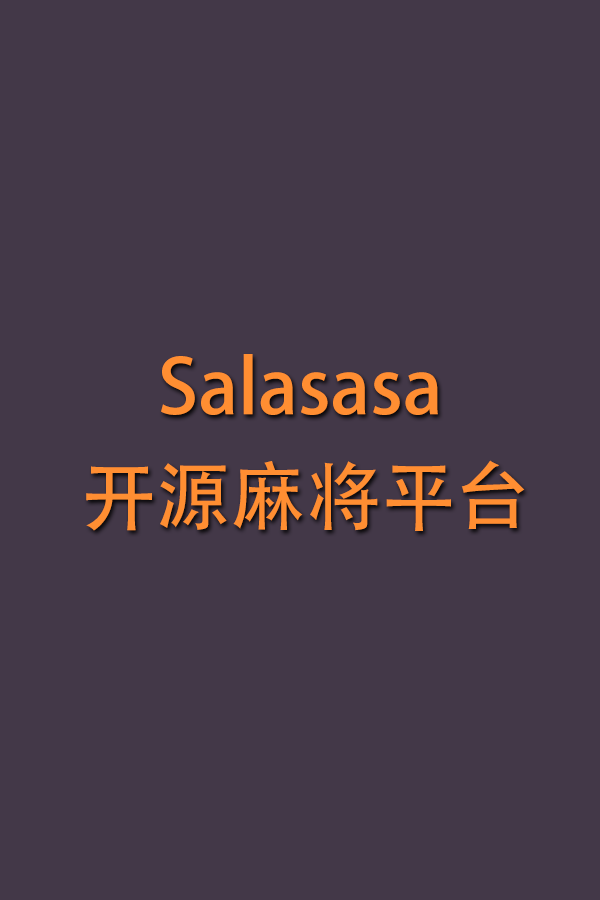
<style>
.page{position:relative;width:600px;height:900px;background:#433848}
.page>*{position:absolute;margin:0}
.t1{font:75px "AdobeHeitiStd-Regular";color:#ff8e32}
</style>
<div class="page">
<p class="t1" style="left:161px;top:354px;width:277px;height:61px">Salasasa</p>
<p class="t1" style="left:86px;top:460px;width:439px;height:71px">开源麻将平台</p>
</div>
